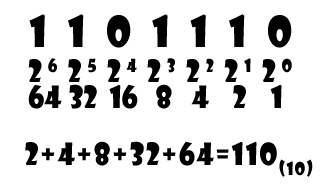
<style>
.page{position:relative;width:323px;height:191px;background:#ffffff}
.page>*{position:absolute;margin:0}
.t1{font:42px "ShowcardGothic-Reg";letter-spacing:0.5em;color:#000000}
.t2{font:30px "ShowcardGothic-Reg";letter-spacing:0.2em;color:#000000}
.t3{font:30px "ShowcardGothic-Reg";color:#000000}
.t4{font:30px "ShowcardGothic-Reg";letter-spacing:0.05em;color:#000000}
</style>
<div class="page">
<p class="t1" style="left:29px;top:14px;width:263px;height:34px">1101110</p>
<p class="t2" style="left:28px;top:58px;width:264px;height:24px">26 25 24 23 22 21 20</p>
<p class="t3" style="left:28px;top:84px;width:254px;height:25px">64 32  16   8   4    2    1</p>
<p class="t4" style="left:25px;top:141px;width:288px;height:36px">2+4+8+32+64=110(10)</p>
</div>
